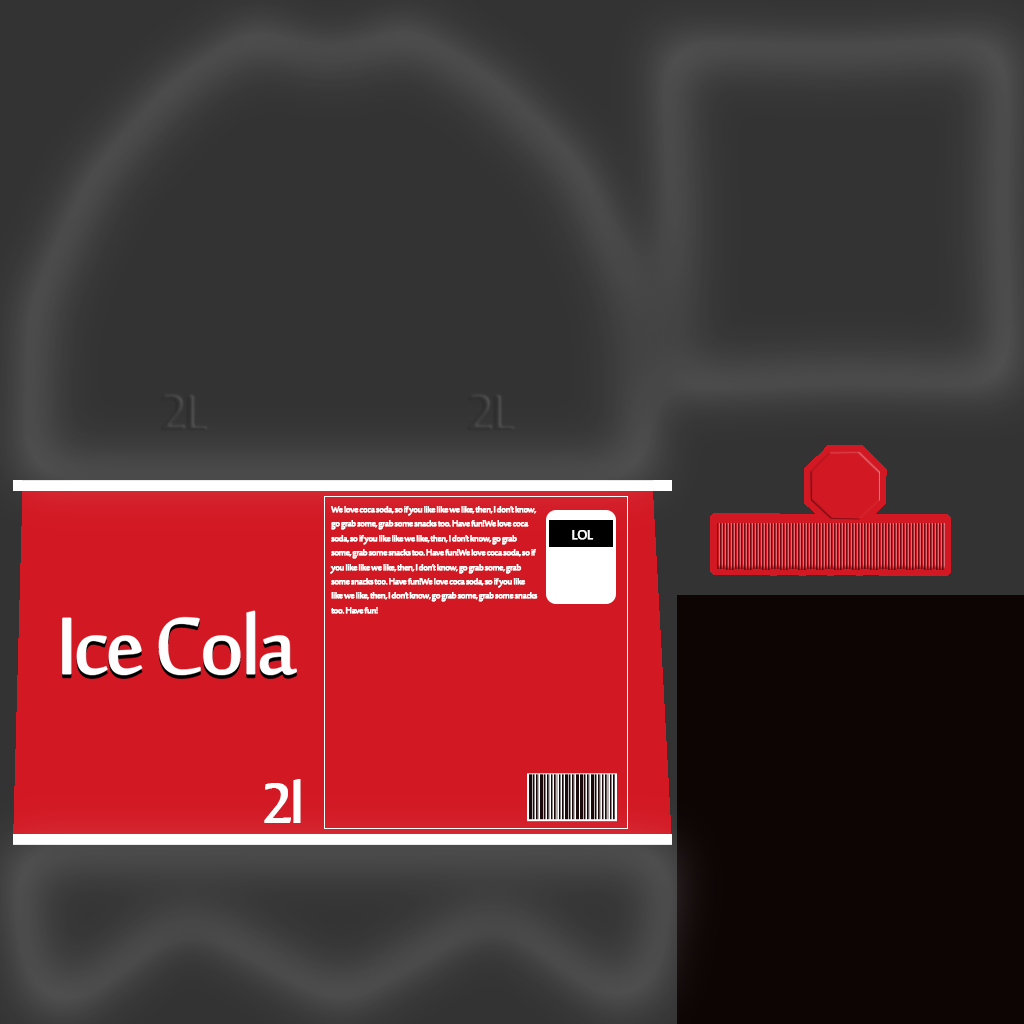
<style>
.page{position:relative;width:1024px;height:1024px;background:#333333}
.page>*{position:absolute;margin:0}
.t1{font:12px "SakkalMajalla";letter-spacing:-0.06em;color:#ffffff;font-weight:bold}
.t2{font:18px "SakkalMajalla";letter-spacing:-0.06em;color:#ffffff;font-weight:bold}
.t3{font:75px "SakkalMajalla";letter-spacing:-0.06em;color:#ffffff;font-weight:bold}
</style>
<div class="page">
<p class="t1" style="left:330px;top:506px;width:208px;height:108px">We love coca soda, so if you like like we like, then, I don’t know, go grab some, grab some snacks too. Have fun!We love coca soda, so if you like like we like, then, I don’t know, go grab some, grab some snacks too. Have fun!We love coca soda, so if you like like we like, then, I don’t know, go grab some, grab some snacks too. Have fun!We love coca soda, so if you like like we like, then, I don’t know, go grab some, grab some snacks too. Have fun!</p>
<p class="t2" style="left:572px;top:530px;width:22px;height:10px">LOL</p>
<p class="t3" style="left:264px;top:779px;width:37px;height:44px">2l</p>
</div>
